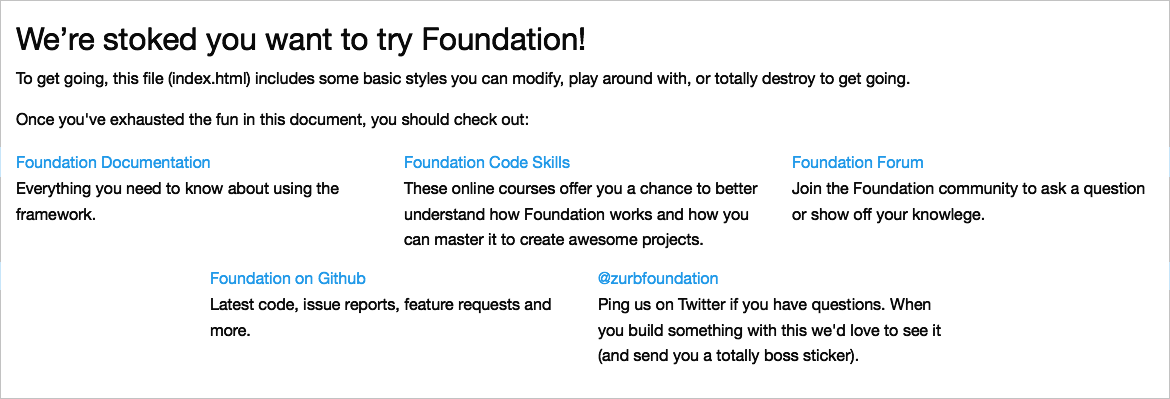
<style>
.page{position:relative;width:1170px;height:399px;background:#ffffff}
.page>*{position:absolute;margin:0}
.t1{font:12px "MyriadPro-Regular";color:#000000}
.t2{font:12px "MyriadPro-Regular";color:#2199e8}
</style>
<div class="page">
<p class="t1" style="left:15px;top:27px;width:895px;height:102px">We’re stoked you want to try Foundation!<br>To get going, this file (index.html) includes some basic styles you can modify, play around with, or totally destroy to get going.<br>Once you've exhausted the fun in this document, you should check out:</p>
<p class="t1" style="left:15px;top:156px;width:324px;height:65px"><span class="t2">Foundation Documentation<br></span>Everything you need to know about using the framework.</p>
<p class="t1" style="left:403px;top:155px;width:355px;height:94px"><span class="t2">Foundation Code Skills<br></span>These online courses offer you a chance to better understand how Foundation works and how you can master it to create awesome projects.</p>
<p class="t1" style="left:792px;top:156px;width:353px;height:68px"><span class="t2">Foundation Forum<br></span>Join the Foundation community to ask a question or show off your knowlege.</p>
<p class="t1" style="left:210px;top:271px;width:341px;height:66px"><span class="t2">Foundation on Github<br></span>Latest code, issue reports, feature requests and more.</p>
<p class="t1" style="left:598px;top:271px;width:343px;height:94px"><span class="t2">@zurbfoundation<br></span>Ping us on Twitter if you have questions. When you build something with this we'd love to see it (and send you a totally boss sticker).</p>
</div>
